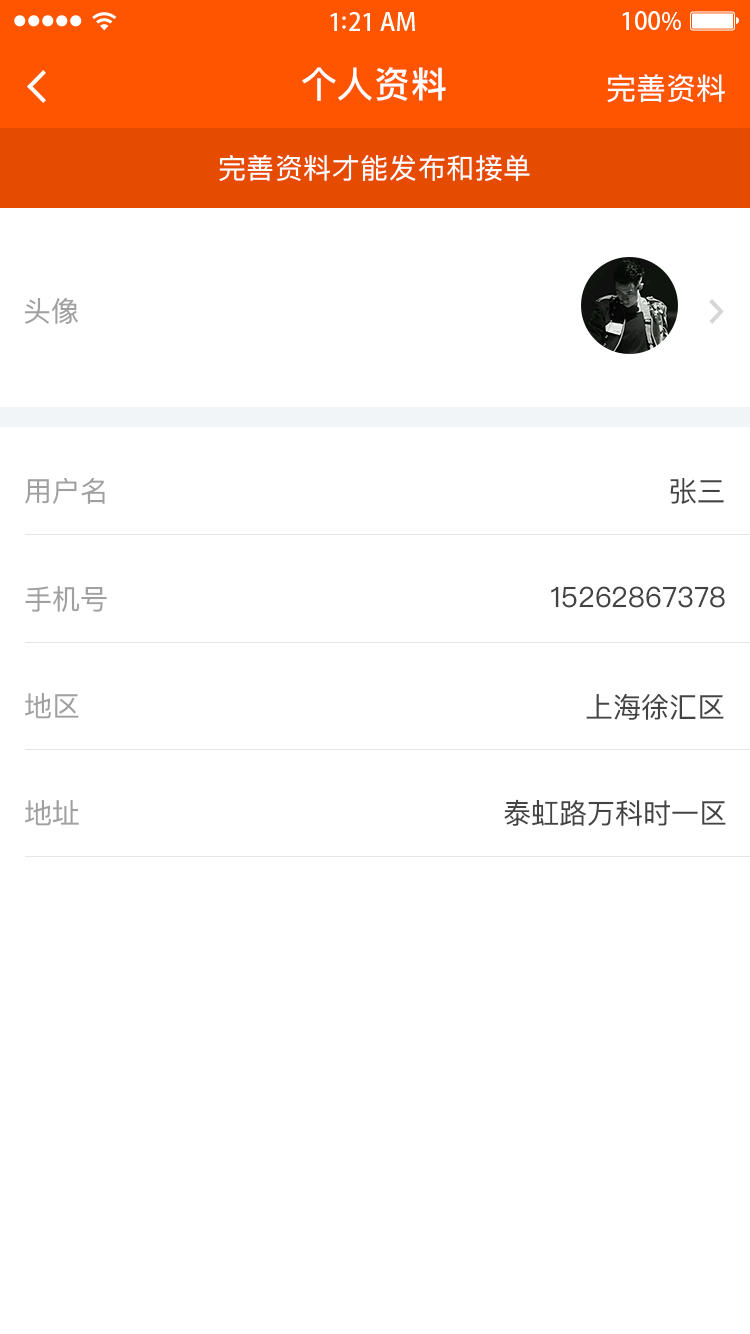
<style>
.page{position:relative;width:750px;height:1334px;background:#ffffff}
.page>*{position:absolute;margin:0}
.t1{font:36px "PingFangSC-Medium";letter-spacing:0.02em;color:#ffffff}
.t2{font:30px "PingFangSC-Regular";color:#ffffff}
.t3{font:28px "PingFangSC-Regular";letter-spacing:0.02em;color:#ffffff}
.t4{font:28px "PingFangSC-Regular";color:#a0a0a0;text-transform:uppercase}
.t5{font:28px "PingFangSC-Regular";color:#a0a0a0}
.t6{font:28px "PingFangSC-Regular";color:#434343}
</style>
<div class="page">
<p class="t1" style="left:302px;top:67px;width:144px;height:34px">个人资料</p>
<p class="t2" style="left:607px;top:74px;width:118px;height:29px">完善资料</p>
<p class="t3" style="left:219px;top:154px;width:311px;height:27px">完善资料才能发布和接单</p>
<p class="t4" style="left:24px;top:297px;width:54px;height:27px">头像</p>
<p class="t5" style="left:25px;top:478px;width:80px;height:26px">用户名</p>
<p class="t6" style="left:670px;top:478px;width:54px;height:26px">张三</p>
<p class="t5" style="left:25px;top:586px;width:82px;height:26px">手机号</p>
<p class="t6" style="left:551px;top:586px;width:174px;height:22px">15262867378</p>
<p class="t5" style="left:25px;top:693px;width:54px;height:26px">地区</p>
<p class="t6" style="left:586px;top:693px;width:138px;height:27px">上海徐汇区</p>
<p class="t5" style="left:25px;top:800px;width:54px;height:26px">地址</p>
<p class="t6" style="left:504px;top:799px;width:222px;height:27px">泰虹路万科时一区</p>
</div>
